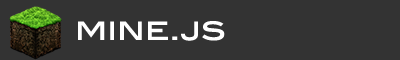
<style>
.page{position:relative;width:400px;height:60px;background:#333333}
.page>*{position:absolute;margin:0}
.t1{font:30px "BlairMdITCTTMedium";color:#ffffff}
</style>
<div class="page">
<p class="t1" style="left:78px;top:21px;width:147px;height:20px">mine.js</p>
</div>
